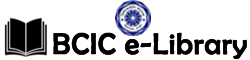
<style>
.page{position:relative;width:250px;height:60px;background:#ffffff}
.page>*{position:absolute;margin:0}
.t1{font:30px "BerlinSansFB-Reg";color:#000000;font-weight:bold}
</style>
<div class="page">
<p class="t1" style="left:53px;top:32px;width:194px;height:27px">BCIC e-Library</p>
</div>
